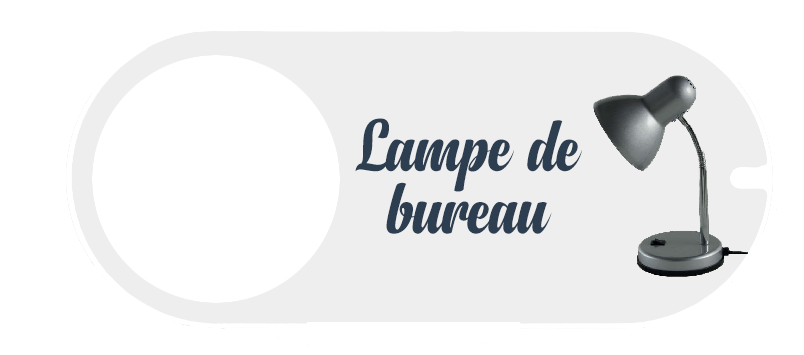
<style>
.page{position:relative;width:804px;height:355px;background:#ffffff}
.page>*{position:absolute;margin:0}
.t1{font:75px/62.5px "Anydore";letter-spacing:-0.014em;color:#2c3e50}
</style>
<div class="page">
<p class="t1" style="left:355px;top:118px;width:227px;height:116px;text-align:center">Lampe de<br>bureau</p>
</div>
